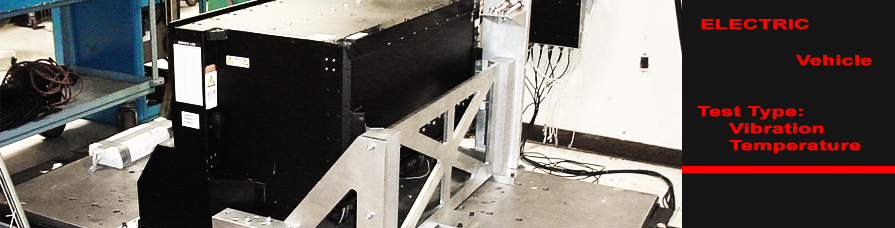
<style>
.page{position:relative;width:895px;height:228px;background:#151515}
.page>*{position:absolute;margin:0}
.t1{font:14px "Arial-BoldMT";color:#ff0000;font-weight:bold;scale:1.5 1}
</style>
<div class="page">
<p class="t1" style="left:701px;top:18px;width:108px;height:12px">ELECTRIC</p>
<p class="t1" style="left:796px;top:55px;width:76px;height:11px">Vehicle</p>
<p class="t1" style="left:697px;top:106px;width:164px;height:47px">Test Type:<br>     Vibration <br>     Temperature</p>
</div>
